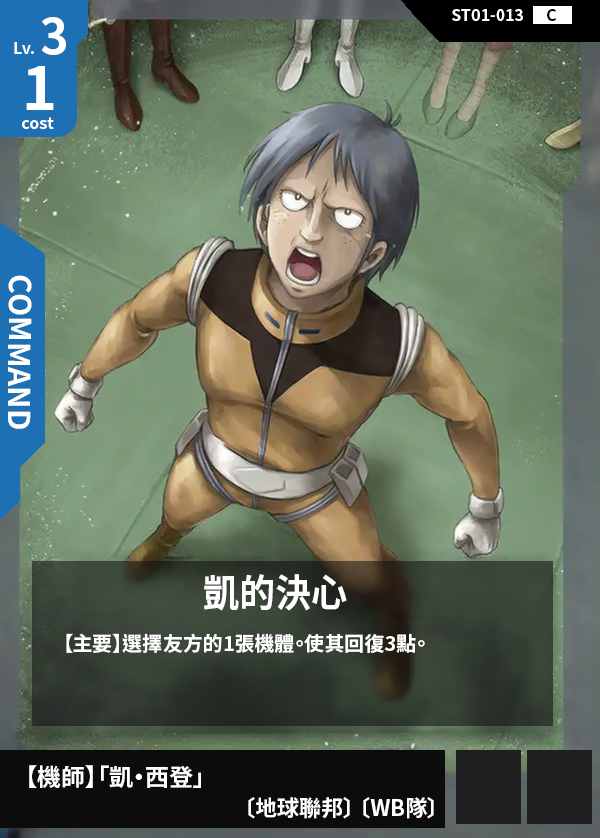
<style>
.page{position:relative;width:600px;height:838px}
.page>*{position:absolute;margin:0}
.t1{font:48px "NotoSansCJKtc-Bold";color:#ffffff}
.t2{font:16px "NotoSansCJKtc-Bold";color:#ffffff}
.t3{font:16px "NotoSansCJKtc-Bold";color:#000000}
.t4{font:60px "NotoSansCJKtc-Bold";color:#ffffff}
.t5{font:30px "NotoSansCJKtc-Bold";color:#ffffff}
.t6{font:38.4px "NotoSansCJKtc-Bold";color:#ffffff;scale:0.94 1}
.t7{font:20px "NotoSansCJKtc-Bold";color:#ffffff}
.t8{font:24px "NotoSansCJKtc-Bold";color:#ffffff}
.t9{font:22px "NotoSansCJKtc-Bold";color:#ffffff}
</style>
<div class="page">
<p class="t1" style="left:41px;top:17px;width:25px;height:38px">3</p>
<p class="t2" style="left:452px;top:9px;width:71px;height:12px">ST01-013</p>
<p class="t3" style="left:547px;top:9px;width:10px;height:12px">C</p>
<p class="t2" style="left:14px;top:42px;width:20px;height:12px">Lv.</p>
<p class="t4" style="left:26px;top:66px;width:28px;height:44px">1</p>
<p class="t2" style="left:22px;top:117px;width:32px;height:12px">cost</p>
<p class="t5" style="left:7px;top:275px;width:25px;height:154px;rotate:90deg">COMMAND</p>
<p class="t6" style="left:204px;top:574px;width:143px;height:37px">凱的決心</p>
<p class="t7" style="left:66px;top:633px;width:359px;height:20px">【主要】選擇友方的1張機體。使其回復3點。</p>
<p class="t8" style="left:29px;top:765px;width:172px;height:23px">【機師】「凱・西登」</p>
<p class="t9" style="left:248px;top:797px;width:186px;height:22px">〔地球聯邦〕 〔WB隊〕</p>
</div>
